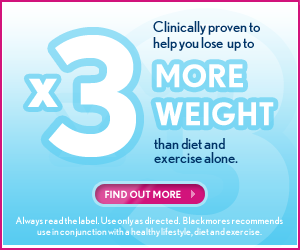
<style>
.page{position:relative;width:300px;height:250px}
.page>*{position:absolute;margin:0}
.t1{font:15px/16px "NobelRegular";color:#003366}
.t2{font:161.7px "NobelBold";color:#ffffff}
.t3{font:31px/38px "NobelBold";color:#ffffff}
.t4{font:65.3px "NobelBold";color:#ffffff}
.t5{font:15px "NobelRegular";color:#003366}
.t6{font:10px "NobelBold";color:#ffffff}
.t7{font:10px/11px "NobelRegular";color:#ffffff}
</style>
<div class="page">
<p class="t1" style="left:153px;top:21px;width:107px;height:30px">Clinically proven to<br>help you lose  up to</p>
<p class="t2" style="left:48px;top:35px;width:88px;height:122px">3</p>
<p class="t3" style="left:155px;top:64px;width:119px;height:62px">MORE <br>WEIGHT</p>
<p class="t4" style="left:27px;top:78px;width:31px;height:29px">x</p>
<p class="t5" style="left:154px;top:138px;width:84px;height:25px">than diet and exercise alone.</p>
<p class="t6" style="left:105px;top:190px;width:76px;height:8px">FIND OUT MORE</p>
<p class="t7" style="left:15px;top:216px;width:268px;height:21px;text-align:center">Always read the label. Use only as directed.  Blackmores recommends use in conjunction with a healthy lifestyle, diet and exercise.</p>
</div>
